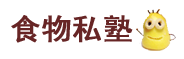
<style>
.page{position:relative;width:184px;height:59px;background:#ffffff}
.page>*{position:absolute;margin:0}
.t1{font:29.1px "SimHei";color:#672525;font-weight:bold;scale:1.03 1}
</style>
<div class="page">
<p class="t1" style="left:11px;top:15px;width:122px;height:28px">食物私塾</p>
</div>
